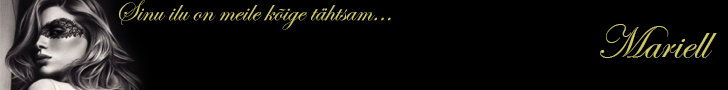
<style>
.page{position:relative;width:728px;height:90px;background:#000000}
.page>*{position:absolute;margin:0}
.t1{font:30px "EdwardianScriptITC";color:#cfc864}
.t2{font:48px "EdwardianScriptITC";color:#cfc864}
</style>
<div class="page">
<p class="t1" style="left:119px;top:0px;width:272px;height:30px">Sinu ilu on meile kõige tähtsam...</p>
<p class="t2" style="left:600px;top:24px;width:117px;height:34px">Mariell</p>
</div>
